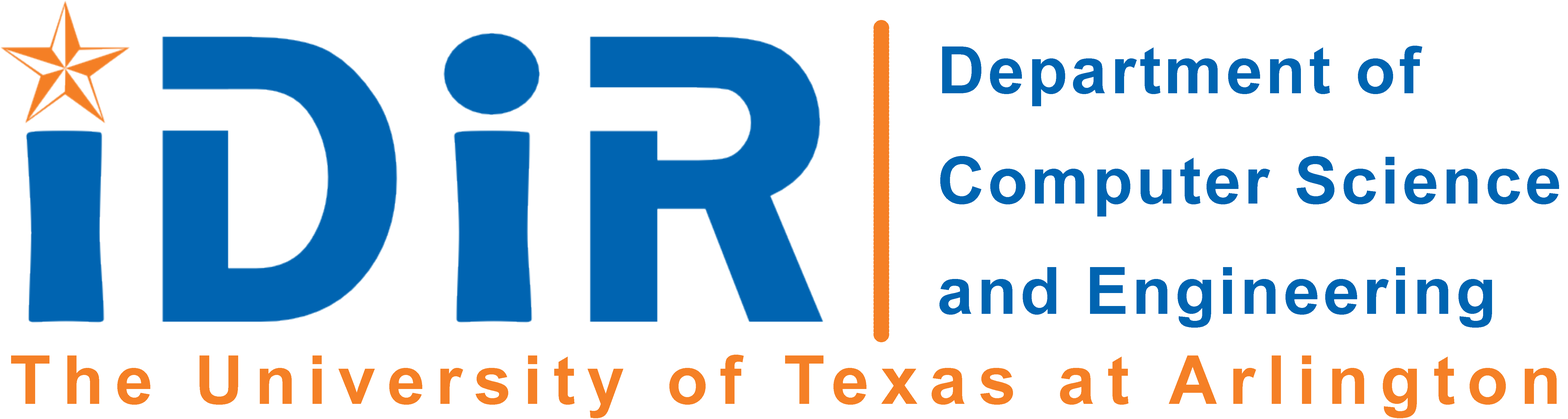
<style>
.page{position:relative;width:1568px;height:419px;background:#ffffff}
.page>*{position:absolute;margin:0}
.t1{font:65.5px/110.4px "Arial-BoldMT";letter-spacing:0.05em;color:#0064b1}
.t2{font:67.6px "Arial-BoldMT";letter-spacing:0.17em;color:#f58026}
</style>
<div class="page">
<p class="t1" style="left:939px;top:46px;width:620px;height:282px">Department of<br>Computer Science<br>and Engineering</p>
<p class="t2" style="left:11px;top:355px;width:1546px;height:63px">The University of Texas at Arlington</p>
</div>
